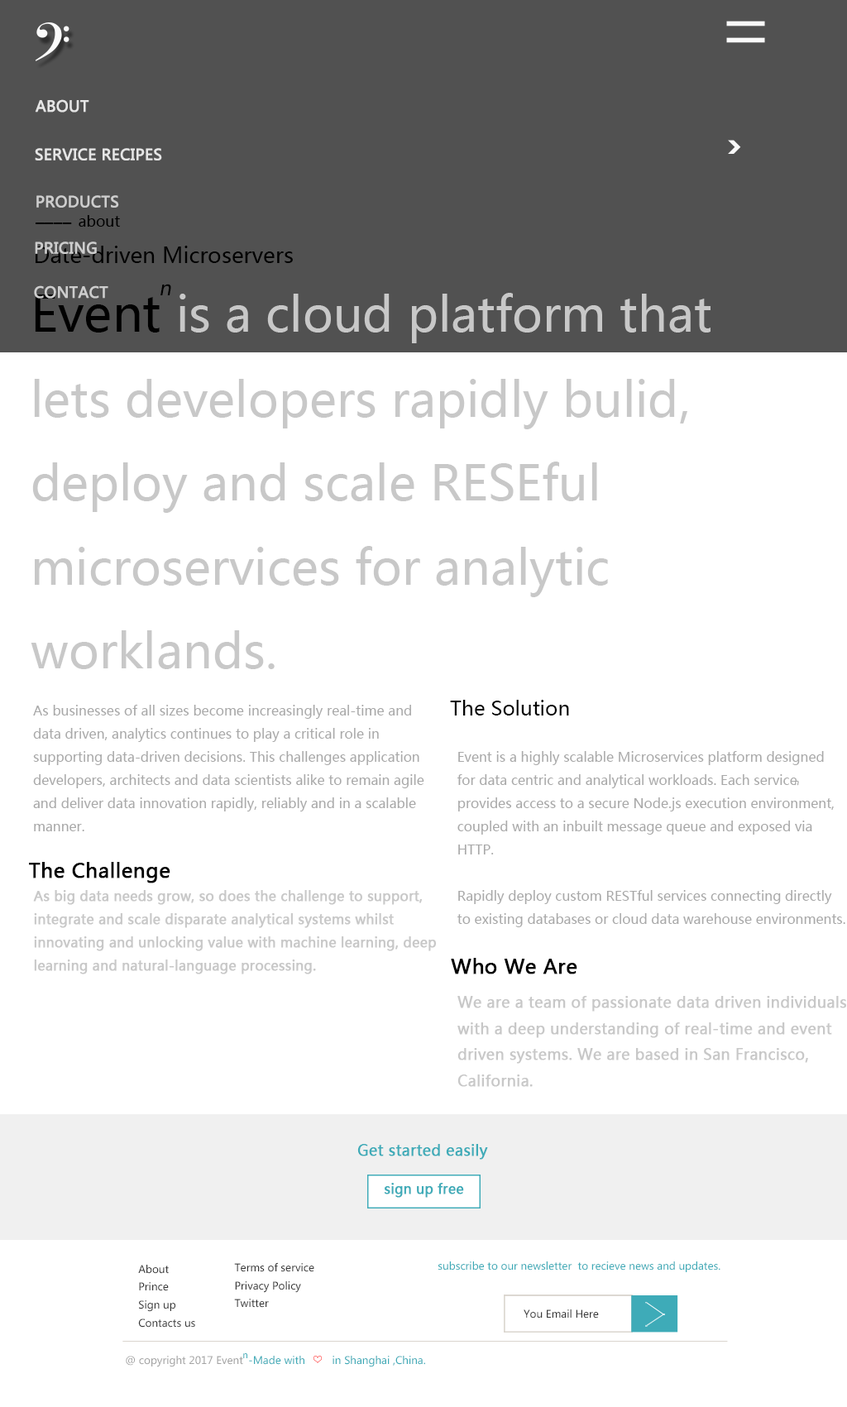
<style>
.page{position:relative;width:847px;height:1407px;background:#ffffff}
.page>*{position:absolute;margin:0}
.t1{font:14.9px "MicrosoftYaHei";color:#e5e5e5;font-weight:bold}
.t2{font:14.9px "MicrosoftYaHei";color:#cdcdcd;font-weight:bold}
.t3{font:14.9px "MicrosoftYaHei";color:#000000}
.t4{font:19.9px "MicrosoftYaHei";color:#000000}
.t5{font:21.5px "MicrosoftYaHei";color:#010101}
.t6{font:19.9px "MicrosoftYaHei";color:#010101;font-style:italic}
.t7{font:19.9px "MicrosoftYaHei";color:#010101}
.t8{font:13.2px "MicrosoftYaHei";color:#a9a9a9}
.t9{font:7.4px "MicrosoftYaHei";color:#a9a9a9;font-style:italic}
.t10{font:19.9px "MicrosoftYaHei";color:#010101;font-weight:bold}
.t11{font:13.2px "MicrosoftYaHei";color:#c8c8c8;font-weight:bold}
.t12{font:14.9px "MicrosoftYaHei";color:#c8c8c8;font-weight:bold}
.t13{font:14.9px "MicrosoftYaHei";color:#3eabb8;font-weight:bold}
.t14{font:13.2px "MicrosoftYaHei";color:#3eabb8;font-weight:bold}
.t15{font:10.3px "MicrosoftYaHei";color:#383838}
.t16{font:10.3px "MicrosoftYaHei";color:#3eabb8}
.t17{font:10.3px "MicrosoftYaHei";color:#a3a3a3}
.t18{font:8.8px "MicrosoftYaHei";color:#3eabb8}
</style>
<div class="page">
<p class="t1" style="left:35px;top:99px;width:54px;height:14px">ABOUT</p>
<p class="t1" style="left:35px;top:148px;width:127px;height:13px">SERVICE RECIPES</p>
<p class="t2" style="left:36px;top:195px;width:83px;height:13px">PRODUCTS</p>
<p class="t3" style="left:79px;top:215px;width:41px;height:12px">about</p>
<p class="t4" style="left:36px;top:223px;width:36px;height:1px">____</p>
<p class="t2" style="left:35px;top:242px;width:62px;height:12px">PRICING</p>
<p class="t5" style="left:36px;top:246px;width:257px;height:17px">Date-driven Microservers</p>
<p class="t2" style="left:34px;top:285px;width:74px;height:14px">CONTACT</p>
<p class="t6" style="left:161px;top:284px;width:10px;height:11px">n</p>
<p class="t7" style="left:450px;top:700px;width:119px;height:16px">The Solution</p>
<p class="t8" style="left:33px;top:705px;width:391px;height:127px">As businesses of all sizes become increasingly real-time and <br>data driven, analytics continues to play a critical role in <br>supporting data-driven decisions. This challenges application <br>developers, architects and data scientists alike to remain agile<br>and deliver data innovation rapidly, reliably and in a scalable <br>manner.</p>
<p class="t8" style="left:458px;top:751px;width:388px;height:177px">Event is a highly scalable Microservices platform designed<br>for data centric and analytical workloads. Each service <br>provides access to a secure Node.js execution environment, <br>coupled with an inbuilt message queue and exposed via <br>HTTP.<br><br>Rapidly deploy custom RESTful services connecting directly <br>to existing databases or cloud data warehouse environments.</p>
<p class="t9" style="left:794px;top:780px;width:5px;height:6px">n</p>
<p class="t10" style="left:29px;top:862px;width:141px;height:22px">The Challenge</p>
<p class="t11" style="left:33px;top:890px;width:404px;height:85px">As big data needs grow, so does the challenge to support,<br>integrate and scale disparate analytical systems whilst <br>innovating and unlocking value with machine learning, deep<br>learning and natural-language processing.</p>
<p class="t10" style="left:451px;top:958px;width:127px;height:17px">Who We Are</p>
<p class="t12" style="left:458px;top:996px;width:388px;height:91px">We are a team of passionate data driven individuals<br>with a deep understanding of real-time and event<br>driven systems. We are based in San Francisco, <br>California.</p>
<p class="t13" style="left:357px;top:1144px;width:131px;height:16px">Get started easily</p>
<p class="t14" style="left:385px;top:1183px;width:79px;height:15px">sign up free</p>
<p class="t15" style="left:138px;top:1265px;width:57px;height:63px">About<br>Prince<br>Sign up<br>Contacts us</p>
<p class="t15" style="left:234px;top:1263px;width:80px;height:45px">Terms of service<br>Privacy Policy<br>Twitter</p>
<p class="t16" style="left:439px;top:1262px;width:282px;height:11px">subscribe to our newsletter  to recieve news and updates.</p>
<p class="t15" style="left:524px;top:1310px;width:75px;height:9px">You Email Here</p>
<p class="t17" style="left:126px;top:1356px;width:117px;height:12px">@ copyright 2017 Event</p>
<p class="t18" style="left:243px;top:1354px;width:4px;height:5px">n</p>
<p class="t16" style="left:249px;top:1356px;width:55px;height:9px">-Made with</p>
<p class="t16" style="left:333px;top:1356px;width:92px;height:12px">in Shanghai ,China.</p>
</div>
